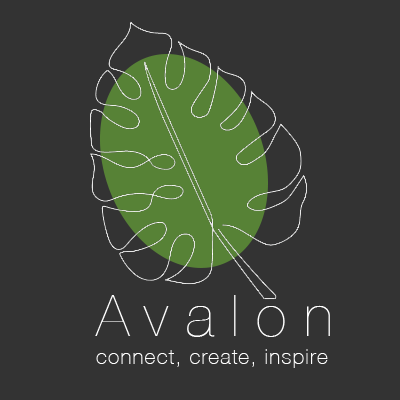
<style>
.page{position:relative;width:400px;height:400px;background:#333333}
.page>*{position:absolute;margin:0}
.t1{font:58.3px "HelveticaNeue-UltraLight";letter-spacing:0.3em;color:#ffffff}
.t2{font:20.8px "HelveticaNeue-Thin";letter-spacing:0.06em;color:#ffffff}
</style>
<div class="page">
<p class="t1" style="left:95px;top:295px;width:235px;height:42px">Avalon</p>
<p class="t2" style="left:96px;top:349px;width:232px;height:19px">connect, create, inspire</p>
</div>
